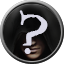
<style>
.page{position:relative;width:64px;height:64px}
.page>*{position:absolute;margin:0}
.t1{font:50px "Windlass";color:#d9d8e6}
</style>
<div class="page">
<p class="t1" style="left:19px;top:10px;width:29px;height:44px">?</p>
</div>
